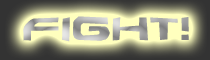
<style>
.page{position:relative;width:210px;height:60px}
.page>*{position:absolute;margin:0}
.t1{font:60px "AlexisGrunge"}
</style>
<div class="page">
<p class="t1" style="left:23px;top:16px;width:166px;height:26px">fight!</p>
</div>
